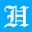
<style>
.page{position:relative;width:32px;height:32px;background:#00aaff}
.page>*{position:absolute;margin:0}
.t1{font:30px "holyunion";color:#ffffff}
</style>
<div class="page">
<p class="t1" style="left:4px;top:5px;width:25px;height:23px">H</p>
</div>
